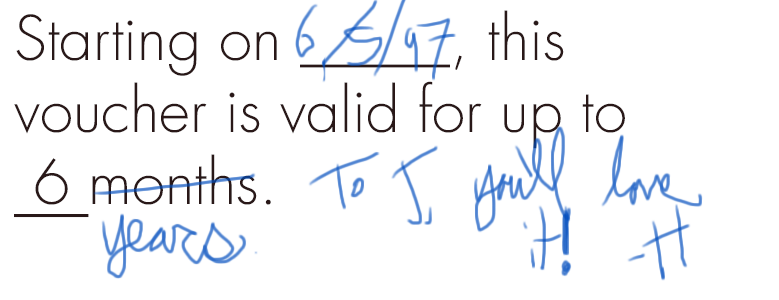
<style>
.page{position:relative;width:779px;height:300px;background:#ffffff}
.page>*{position:absolute;margin:0}
.t1{font:60px "Futura-Light";color:#291818}
.t2{font:60px "Futura-Light";color:#291818;text-decoration:underline}
</style>
<div class="page">
<p class="t1" style="left:14px;top:10px;width:611px;height:208px">Starting on _____, this voucher is valid for up to <br><span class="t2"> 6 </span>months.</p>
</div>
